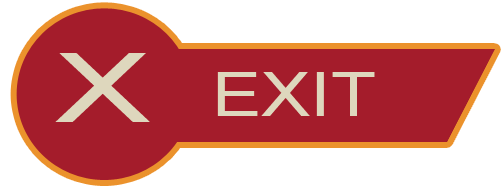
<style>
.page{position:relative;width:504px;height:189px;background:#a41c2b}
.page>*{position:absolute;margin:0}
.t1{font:103.6px "Shruti";color:#ded7bd;scale:1.5 1}
.t2{font:66.8px "Shruti";color:#ded7bd;scale:1.19 1}
</style>
<div class="page">
<p class="t1" style="left:55px;top:53px;width:95px;height:69px">X</p>
<p class="t2" style="left:217px;top:72px;width:158px;height:44px">EXIT</p>
</div>
